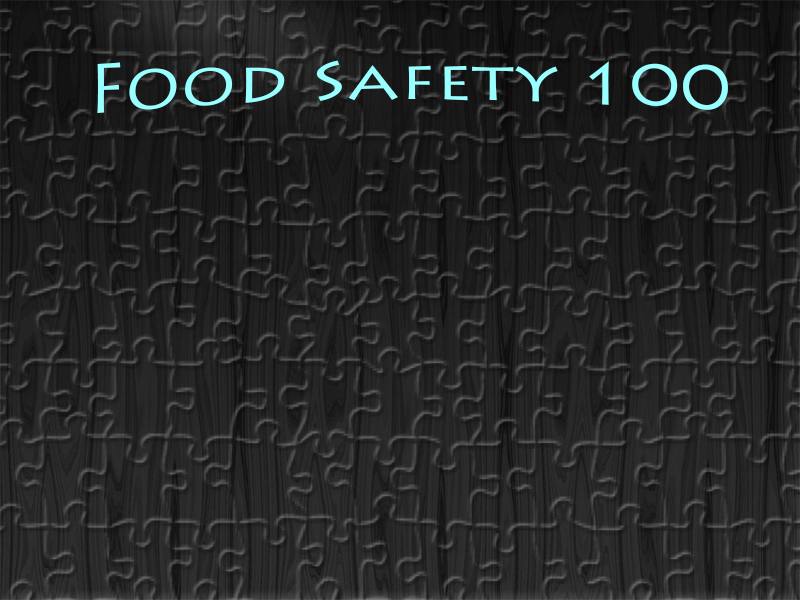
<style>
.page{position:relative;width:800px;height:600px}
.page>*{position:absolute;margin:0}
.t1{font:72px "LithosPro-Regular";color:#99ffff}
</style>
<div class="page">
<p class="t1" style="left:97px;top:60px;width:631px;height:53px">Food Safety 100</p>
</div>
